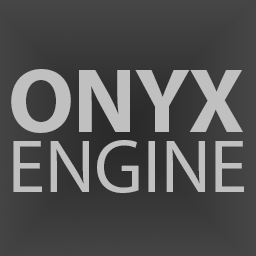
<style>
.page{position:relative;width:256px;height:256px}
.page>*{position:absolute;margin:0}
.t1{font:91.6px "MyriadPro-Bold";color:#c0c0c0}
.t2{font:75.2px "MyriadPro-Regular";color:#c0c0c0}
</style>
<div class="page">
<p class="t1" style="left:11px;top:69px;width:232px;height:64px">ONYX</p>
<p class="t2" style="left:13px;top:140px;width:231px;height:53px">ENGINE</p>
</div>
